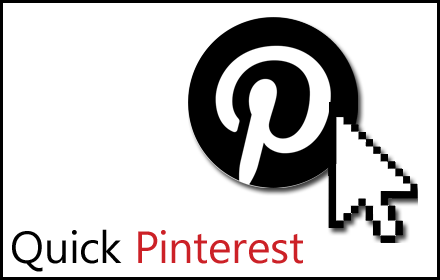
<style>
.page{position:relative;width:440px;height:280px;background:#ffffff}
.page>*{position:absolute;margin:0}
.t1{font:45px "KhmerUI";letter-spacing:0.005em;color:#cc2127}
.t2{font:45px "KhmerUI";letter-spacing:0.005em;color:#000000}
</style>
<div class="page">
<p class="t1" style="left:12px;top:229px;width:291px;height:43px"><span class="t2">Quick </span>Pinterest</p>
</div>
